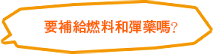
<style>
.page{position:relative;width:213px;height:54px;background:#ffffff}
.page>*{position:absolute;margin:0}
.t1{font:14px "GothicMB101Pr6N-Medium";color:#ff6200}
.t2{font:14px "DFKaiShu-SB-Estd-BF";color:#ff6200}
</style>
<div class="page">
<p class="t1" style="left:44px;top:19px;width:134px;height:15px">要補給燃料和彈藥嗎<span class="t2">?</span></p>
</div>
